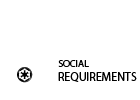
<style>
.page{position:relative;width:140px;height:100px;background:#ffffff}
.page>*{position:absolute;margin:0}
.t1{font:12px "MyriadPro-Regular";color:#000000}
.t2{font:10px "MyriadPro-Regular";color:#000000}
</style>
<div class="page">
<p class="t1" style="left:58px;top:60px;width:79px;height:22px"><span class="t2">SOCIAL<br></span>REQUIREMENTS</p>
</div>
